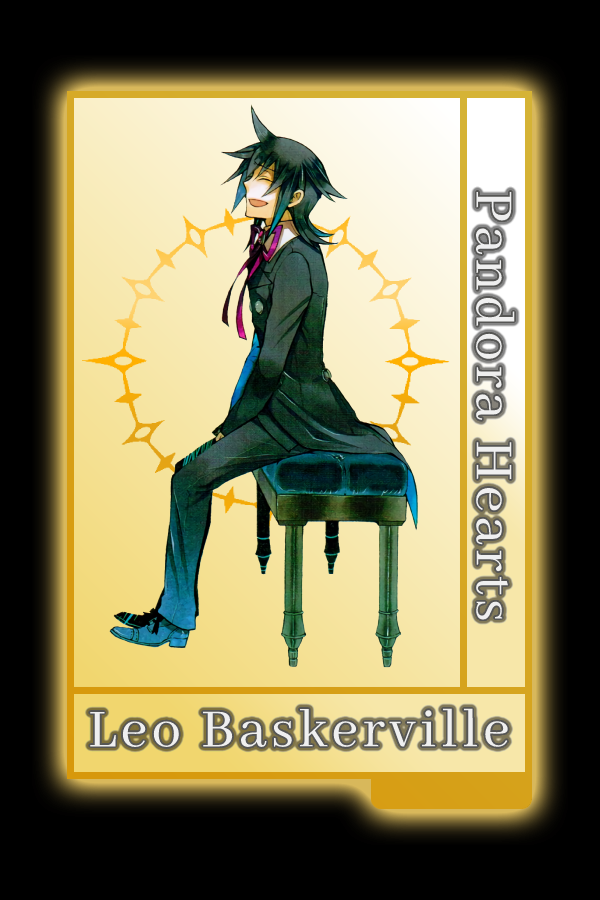
<style>
.page{position:relative;width:600px;height:900px;background:#000000}
.page>*{position:absolute;margin:0}
.t1{font:59.1px "AbhayaLibre-Regular";letter-spacing:0.072em;color:#efefef}
.t2{font:59px "AbhayaLibre-Regular";letter-spacing:0.072em;color:#efefef}
</style>
<div class="page">
<p class="t1" style="left:476px;top:192px;width:39px;height:428px;rotate:90deg">Pandora Hearts</p>
<p class="t2" style="left:90px;top:708px;width:418px;height:40px">Leo Baskerville</p>
</div>
